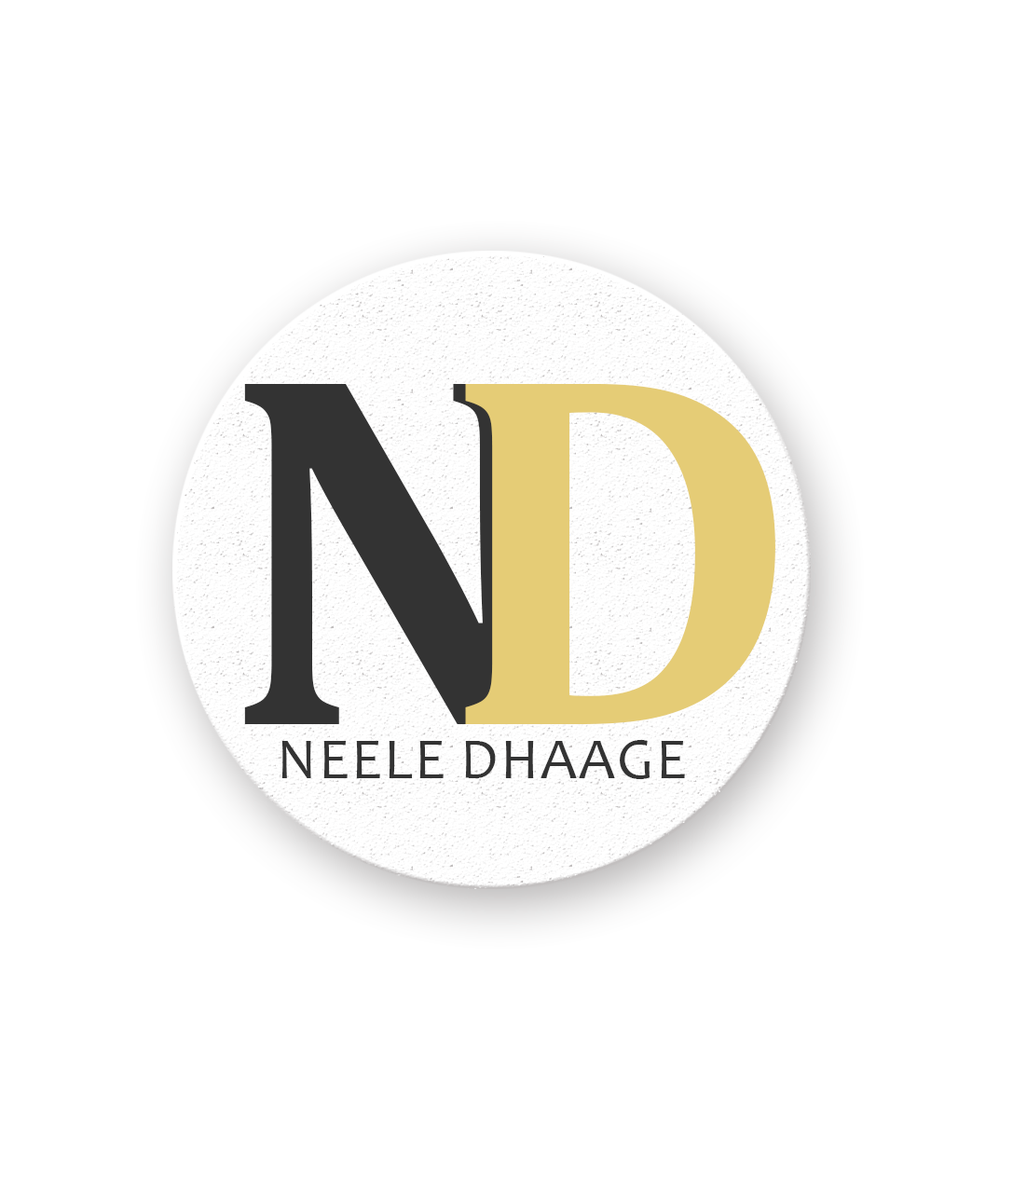
<style>
.page{position:relative;width:1013px;height:1178px;background:#ffffff}
.page>*{position:absolute;margin:0}
.t1{font:509.9px "Cambria-Bold";color:#333333}
.t2{font:509.9px "Cambria-Bold";color:#e5cc76}
.t3{font:58.5px "Candara";color:#333333;text-transform:uppercase}
</style>
<div class="page">
<p class="t1" style="left:244px;top:384px;width:304px;height:340px">N</p>
<p class="t2" style="left:465px;top:384px;width:310px;height:340px">D</p>
<p class="t3" style="left:281px;top:740px;width:404px;height:39px">Neele Dhaage</p>
</div>
